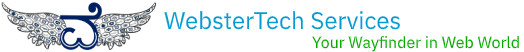
<style>
.page{position:relative;width:524px;height:52px;background:#ffffff}
.page>*{position:absolute;margin:0}
.t1{font:24px "IBMPlexSans";color:#039bd2}
.t2{font:16px "IBMPlexSans";color:#09aa00}
</style>
<div class="page">
<p class="t1" style="left:164px;top:11px;width:236px;height:19px">WebsterTech Services</p>
<p class="t2" style="left:312px;top:36px;width:207px;height:16px">Your Wayfinder in Web World</p>
</div>
